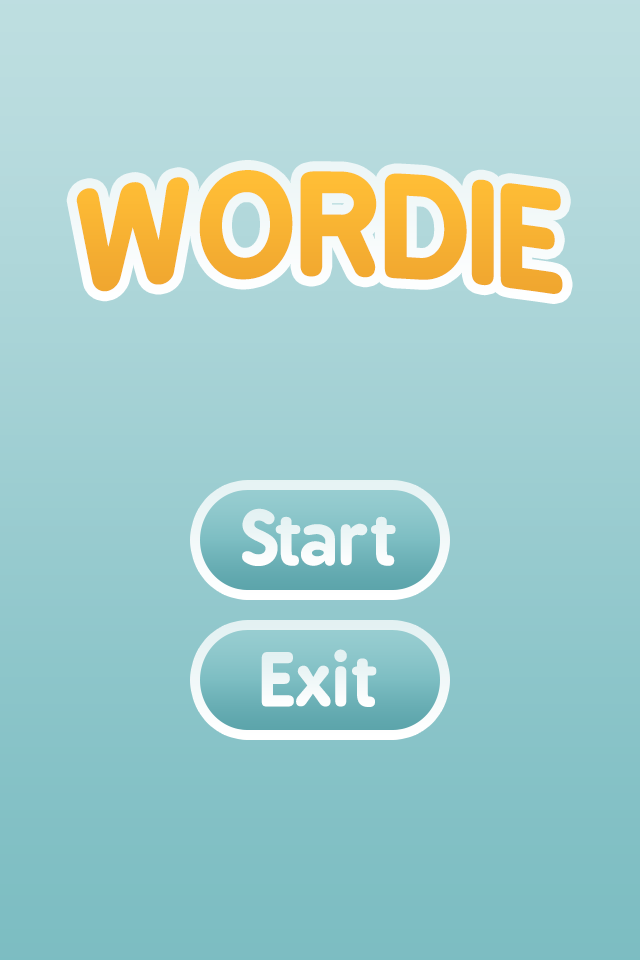
<style>
.page{position:relative;width:640px;height:960px}
.page>*{position:absolute;margin:0}
.t1{font:134.8px "BPreplay-Bold";color:#f8b333}
.t2{font:70.6px "BPreplay-Bold";color:#ffffff}
.t3{font:70.1px "BPreplay-Bold";color:#ffffff}
</style>
<div class="page">
<p class="t1" style="left:76px;top:170px;width:487px;height:124px">WORDIE</p>
<p class="t2" style="left:242px;top:508px;width:154px;height:58px">Start</p>
<p class="t3" style="left:261px;top:649px;width:116px;height:58px">Exit</p>
</div>
